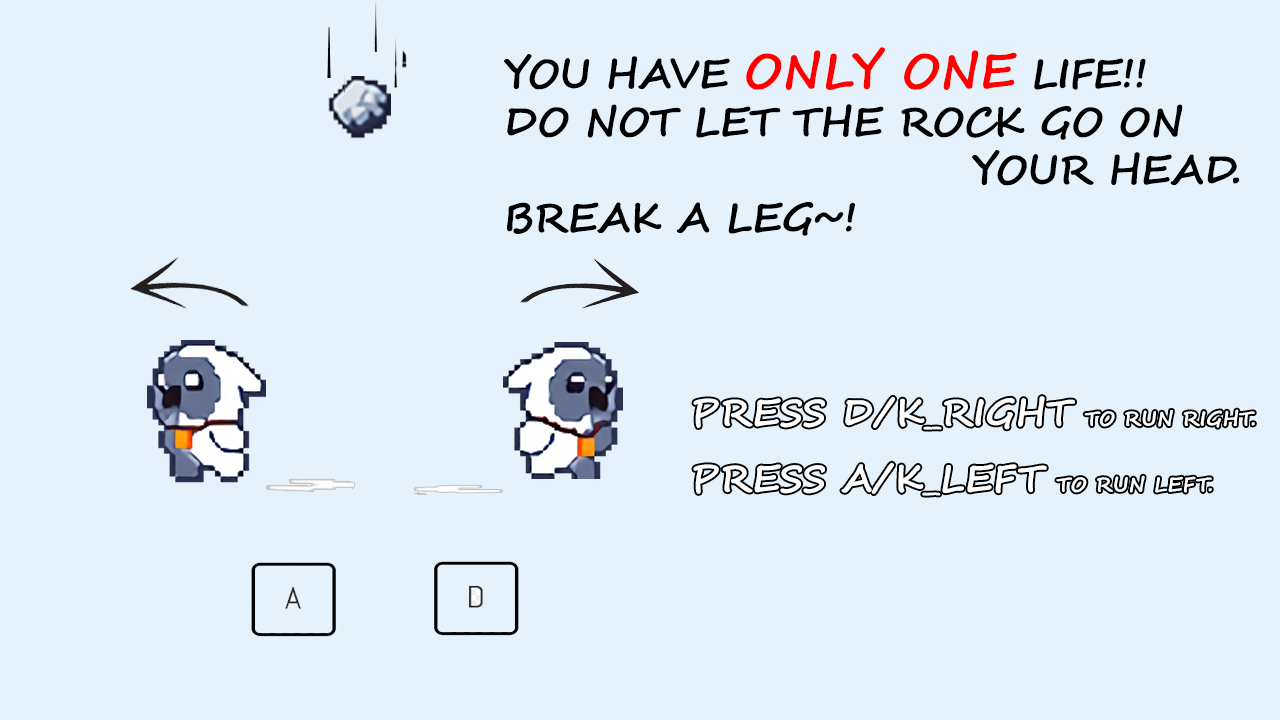
<style>
.page{position:relative;width:1280px;height:720px;background:#e6f2fb}
.page>*{position:absolute;margin:0}
.t1{font:40px/48px "SegoeScript-Bold";letter-spacing:-0.01em;color:#000000;text-transform:uppercase}
.t2{font:48px/48px "SegoeScript-Bold";letter-spacing:-0.01em;color:#ff0000;text-transform:uppercase}
.t3{font:37px "SegoeScript-Bold";letter-spacing:0.01em;color:#ffffff;text-transform:uppercase}
.t4{font:20px "SegoeScript-Bold";letter-spacing:0.01em;color:#ffffff;text-transform:uppercase}
</style>
<div class="page">
<p class="t1" style="left:504px;top:47px;width:736px;height:189px">You have <span class="t2">only one</span> life!!<br>Do not let the rock go on <br>             your head.<br>Break a leg~!</p>
<p class="t3" style="left:693px;top:396px;width:562px;height:34px">press d/k_right <span class="t4">to run right.</span></p>
<p class="t3" style="left:693px;top:462px;width:519px;height:34px">press A/k_lefT <span class="t4">to run LEFT.</span></p>
</div>
